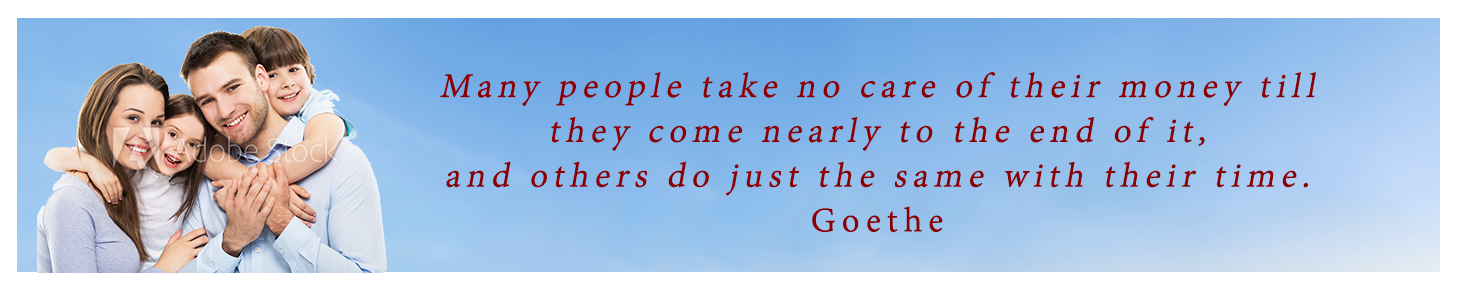
<style>
.page{position:relative;width:1461px;height:286px}
.page>*{position:absolute;margin:0}
.t1{font:37.3px "AdobeDevanagari-Regular";letter-spacing:0.15em;color:#8b0000;font-weight:bold;font-style:italic}
.t2{font:28px "AdobeDevanagari-Regular";letter-spacing:0.15em;color:#8b0000;font-weight:bold;font-style:italic}
.t3{font:37.3px "AdobeDevanagari-Regular";letter-spacing:0.15em;color:#8b0000;font-weight:bold}
</style>
<div class="page">
<p class="t1" style="left:440px;top:72px;width:876px;height:160px;text-align:center"><span class="t2"><br></span>Many people take no care of their money till they come nearly to the end of it, <br>and others do just the same with their time.<span class="t3"> <br>Goethe</span></p>
</div>
